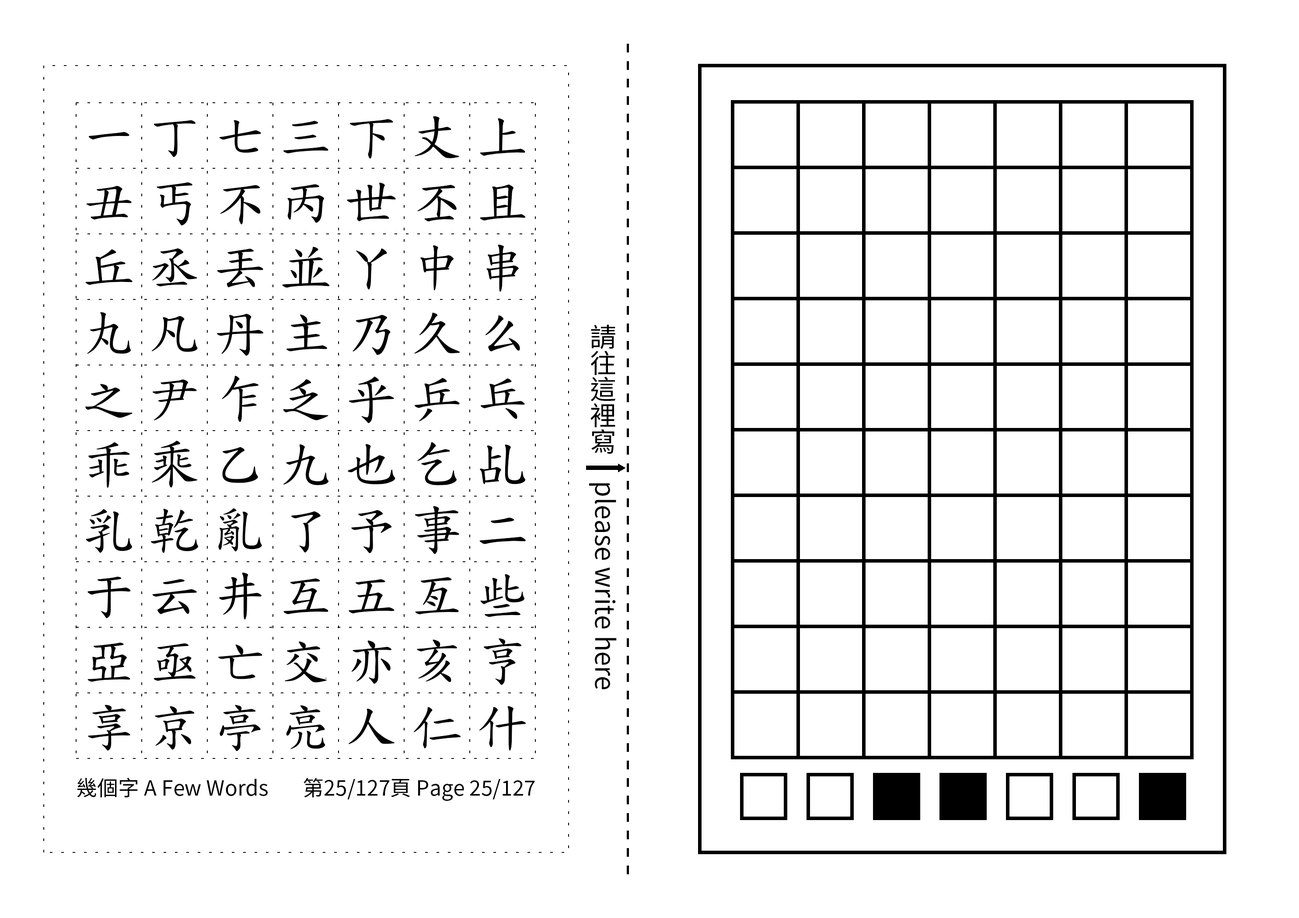
<style>
.page{position:relative;width:1299px;height:918px;background:#ffffff}
.page>*{position:absolute;margin:0}
.t1{font:52.5px/65.6px "TW-Kai-98_1";letter-spacing:0.25em;color:#000000}
.t2{font:26.2px "SourceHanSansTC-Regular";color:#000000}
.t3{font:21px "SourceHanSansTC-Regular";color:#000000}
</style>
<div class="page">
<p class="t1" style="left:85px;top:116px;width:441px;height:636px;text-align:center">一丁七三下丈上丑丐不丙世丕且丘丞丟並丫中串丸凡丹主乃久么之尹乍乏乎乒乓乖乘乙九也乞乩乳乾亂了予事二于云井互五亙些亞亟亡交亦亥亨享京亭亮人仁什</p>
<p class="t2" style="left:589px;top:324px;width:28px;height:366px;text-align:center">請往這裡寫　please write here</p>
<p class="t3" style="left:77px;top:778px;width:191px;height:20px">幾個字 A Few Words</p>
<p class="t3" style="left:303px;top:778px;width:232px;height:23px">第25/127頁 Page 25/127</p>
</div>
